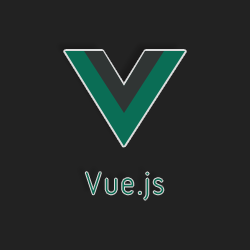
<style>
.page{position:relative;width:250px;height:250px;background:#222222}
.page>*{position:absolute;margin:0}
.t1{font:28px "Variable-Bold";letter-spacing:0.075em;color:#07765b}
</style>
<div class="page">
<p class="t1" style="left:85px;top:172px;width:79px;height:28px">Vue.js</p>
</div>
